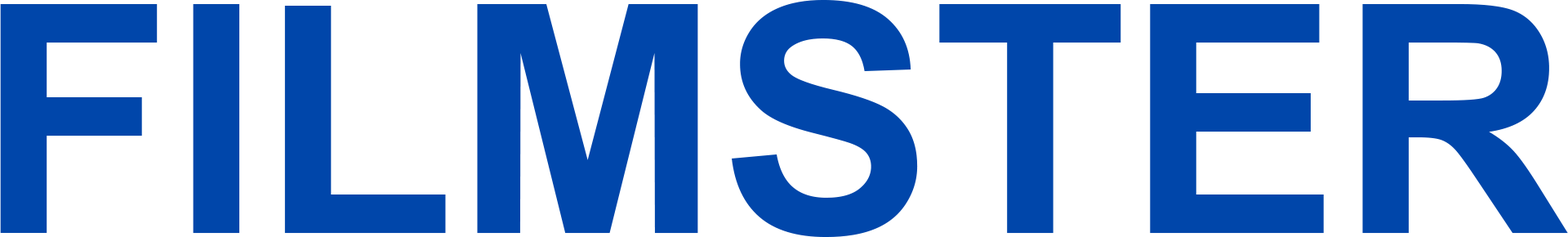
<style>
.page{position:relative;width:1568px;height:237px;background:#ffffff}
.page>*{position:absolute;margin:0}
.t1{font:319px "Arial-BoldMT";color:#0046aa}
</style>
<div class="page">
<p class="t1" style="left:0px;top:0px;width:1568px;height:237px">FILMSTER</p>
</div>
